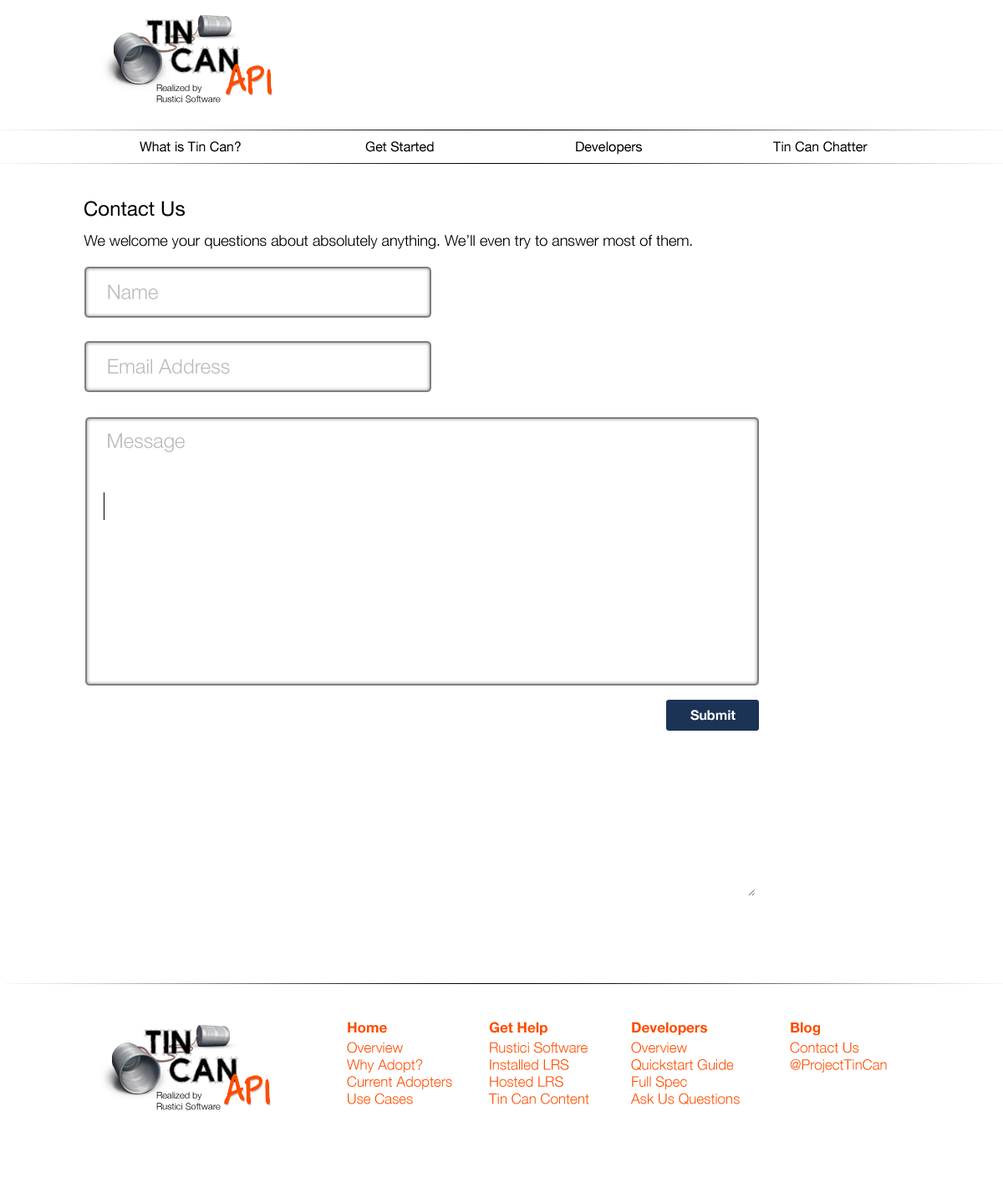
<style>
.page{position:relative;width:1003px;height:1188px;background:#ffffff}
.page>*{position:absolute;margin:0}
.t1{font:9.2px "HelveticaNeue-Light"}
.t2{font:13.4px "HelveticaNeue";color:#000000}
.t3{font:20.1px "HelveticaNeue";color:#000000}
.t4{font:15.1px "HelveticaNeue-Light";color:#000000}
.t5{font:20.1px "HelveticaNeue-Light";color:#bababa}
.t6{font:13.4px "HelveticaNeue-Bold";color:#ffffff}
.t7{font:14.2px "HelveticaNeue-Bold";color:#ff4d00}
.t8{font:14.2px "HelveticaNeue-Light";color:#ff4d00}
</style>
<div class="page">
<p class="t1" style="left:156px;top:84px;width:65px;height:19px">Realized by<br>Rustici Software</p>
<p class="t2" style="left:140px;top:141px;width:101px;height:11px">What is Tin Can?</p>
<p class="t2" style="left:365px;top:141px;width:69px;height:11px">Get Started</p>
<p class="t2" style="left:576px;top:141px;width:66px;height:14px">Developers</p>
<p class="t2" style="left:774px;top:141px;width:94px;height:11px">Tin Can Chatter</p>
<p class="t3" style="left:84px;top:201px;width:101px;height:16px">Contact Us</p>
<p class="t4" style="left:84px;top:235px;width:608px;height:14px">We welcome your questions about absolutely anything. We’ll even try to answer most of them.</p>
<p class="t5" style="left:108px;top:284px;width:50px;height:15px">Name</p>
<p class="t5" style="left:108px;top:359px;width:122px;height:15px">Email Address</p>
<p class="t5" style="left:108px;top:433px;width:77px;height:19px">Message</p>
<p class="t6" style="left:691px;top:710px;width:45px;height:11px">Submit</p>
<p class="t7" style="left:348px;top:1022px;width:39px;height:12px">Home</p>
<p class="t7" style="left:489px;top:1022px;width:59px;height:13px">Get Help</p>
<p class="t7" style="left:632px;top:1022px;width:75px;height:13px">Developers</p>
<p class="t7" style="left:791px;top:1022px;width:29px;height:14px">Blog</p>
<p class="t8" style="left:347px;top:1042px;width:105px;height:63px">Overview<br>Why Adopt?<br>Current Adopters<br>Use Cases</p>
<p class="t8" style="left:488px;top:1042px;width:102px;height:63px">Rustici Software<br>Installed LRS<br>Hosted LRS<br>Tin Can Content</p>
<p class="t8" style="left:631px;top:1042px;width:109px;height:63px">Overview<br>Quickstart Guide<br>Full Spec<br>Ask Us Questions</p>
<p class="t8" style="left:790px;top:1042px;width:97px;height:31px">Contact Us<br>@ProjectTinCan</p>
<p class="t1" style="left:156px;top:1092px;width:65px;height:19px">Realized by<br>Rustici Software</p>
</div>
